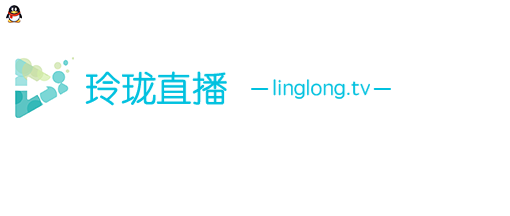
<style>
.page{position:relative;width:510px;height:216px;background:#ffffff}
.page>*{position:absolute;margin:0}
.t1{font:35.2px "STYuanti-TC-Regular";color:#00c1df}
.t2{font:21.1px "STYuanti-TC-Regular";color:#00c1df}
</style>
<div class="page">
<p class="t1" style="left:85px;top:71px;width:142px;height:35px">玲珑直播</p>
<p class="t2" style="left:273px;top:79px;width:97px;height:20px">linglong.tv</p>
</div>
